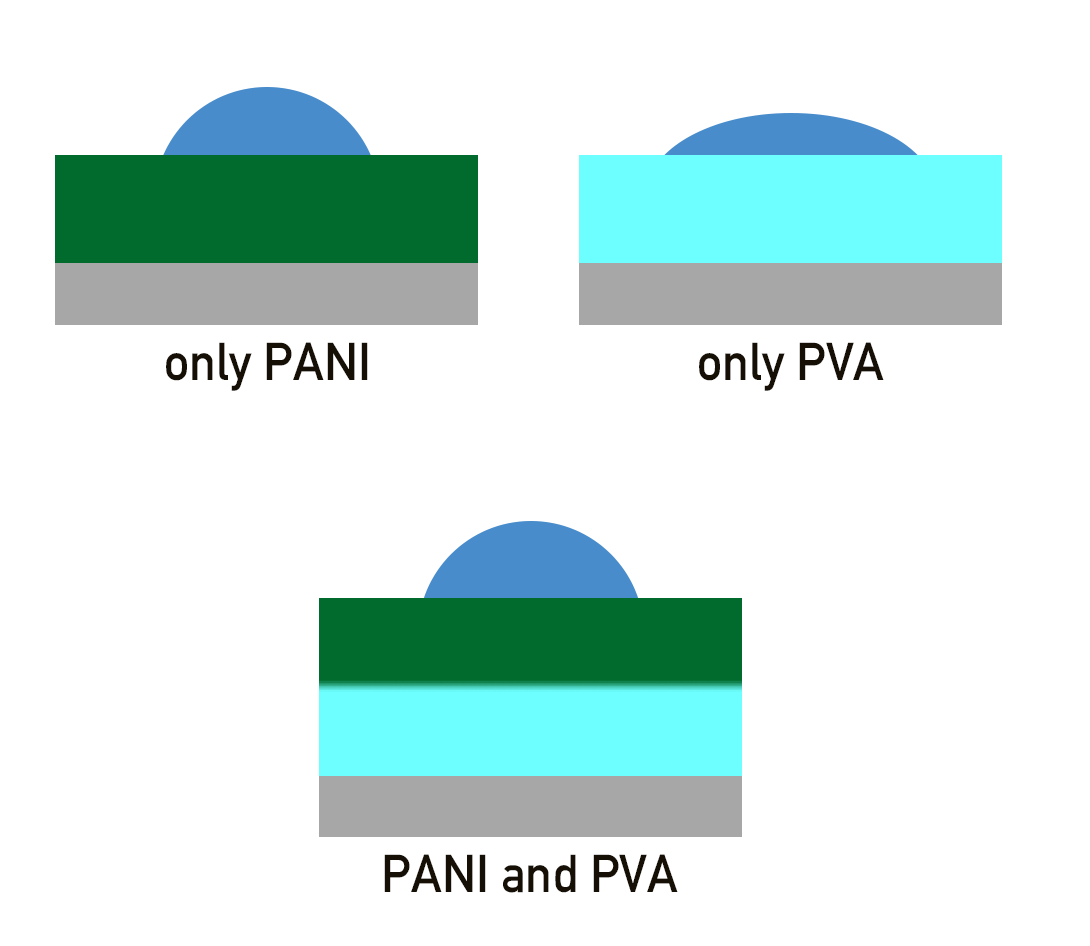
<style>
.page{position:relative;width:1090px;height:946px;background:#ffffff}
.page>*{position:absolute;margin:0}
.t1{font:52.5px "DIN-1451-Mittelschrift-Regular";color:#150f05;scale:0.95 1}
</style>
<div class="page">
<p class="t1" style="left:166px;top:342px;width:202px;height:49px">only PANI</p>
<p class="t1" style="left:699px;top:342px;width:185px;height:49px">only PVA</p>
<p class="t1" style="left:384px;top:854px;width:294px;height:39px">PANI and PVA</p>
</div>
